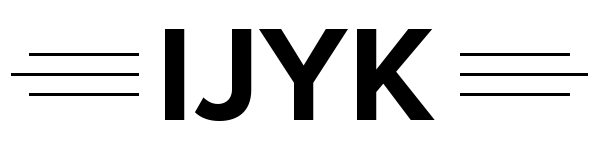
<style>
.page{position:relative;width:600px;height:150px;background:#ffffff}
.page>*{position:absolute;margin:0}
.t1{font:136.1px "ProximaNova-Bold";color:#000000}
</style>
<div class="page">
<p class="t1" style="left:165px;top:29px;width:270px;height:92px">IJYK</p>
</div>
